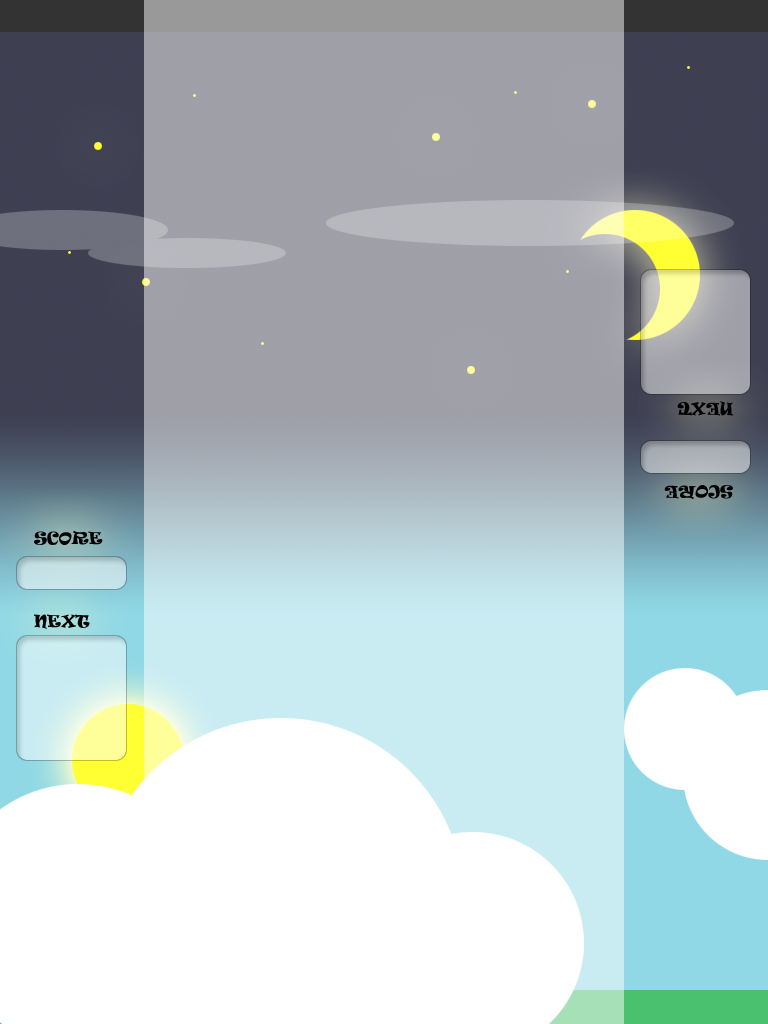
<style>
.page{position:relative;width:768px;height:1024px;background:#ffffff}
.page>*{position:absolute;margin:0}
.t1{font:16px "Ravie";color:#000000;text-transform:uppercase}
</style>
<div class="page">
<p class="t1" style="left:677px;top:401px;width:56px;height:15px;rotate:180deg">next</p>
<p class="t1" style="left:664px;top:485px;width:69px;height:15px;rotate:180deg">score</p>
<p class="t1" style="left:34px;top:530px;width:69px;height:15px">score</p>
<p class="t1" style="left:34px;top:614px;width:56px;height:15px">next</p>
</div>
